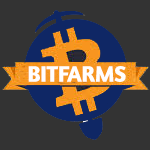
<style>
.page{position:relative;width:150px;height:150px;background:#333333}
.page>*{position:absolute;margin:0}
.t1{font:22.7px "Amaranth-Bold";letter-spacing:-0.01em;color:#fffefe}
</style>
<div class="page">
<p class="t1" style="left:28px;top:66px;width:98px;height:16px">BITFARMS</p>
</div>
